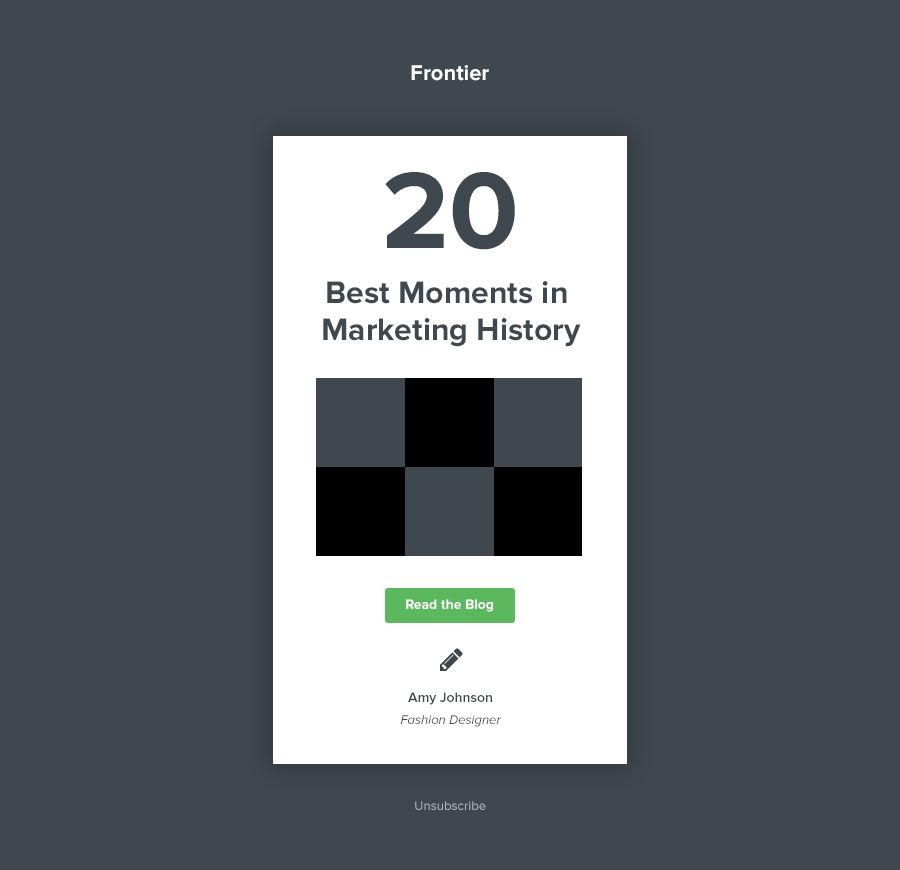
<style>
.page{position:relative;width:900px;height:870px;background:#40484f}
.page>*{position:absolute;margin:0}
.t1{font:22px "ProximaNova-Bold";color:#ffffff}
.t2{font:112.4px "ProximaNova-Bold";color:#40484f}
.t3{font:32.1px/32.1px "ProximaNova-Bold";color:#40484f}
.t4{font:14px "ProximaNova-Bold";color:#ffffff}
.t5{font:13px/22px "ProximaNova-RegularIt";color:#40484f}
.t6{font:14px/22px "ProximaNova-Semibold";color:#40484f}
.t7{font:13.1px "ProximaNova-Regular";color:#b1b3b5}
</style>
<div class="page">
<p class="t1" style="left:411px;top:65px;width:78px;height:16px">Frontier</p>
<p class="t2" style="left:385px;top:172px;width:130px;height:78px">20</p>
<p class="t3" style="left:323px;top:281px;width:258px;height:66px;text-align:center">Best Moments in <br>Marketing History</p>
<p class="t4" style="left:406px;top:599px;width:87px;height:13px">Read the Blog</p>
<p class="t5" style="left:400px;top:692px;width:102px;height:35px;text-align:center"><span class="t6">Amy Johnson<br></span>Fashion Designer</p>
<p class="t7" style="left:415px;top:801px;width:71px;height:9px">Unsubscribe</p>
</div>
